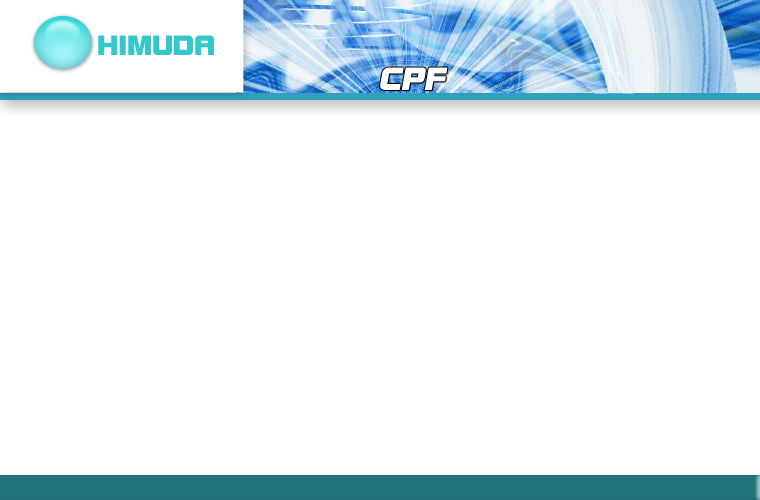
<style>
.page{position:relative;width:760px;height:500px;background:#ffffff}
.page>*{position:absolute;margin:0}
.t1{font:26px "BoltBoldITCbyBT-Regular";color:#34c8ca}
.t2{font:30px "BoltBoldITCbyBT-Regular";color:#ffffff;font-style:italic}
</style>
<div class="page">
<p class="t1" style="left:98px;top:35px;width:116px;height:20px">HIMUDA</p>
<p class="t2" style="left:380px;top:67px;width:68px;height:23px">CPF</p>
</div>
